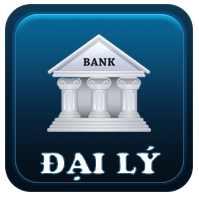
<style>
.page{position:relative;width:199px;height:198px}
.page>*{position:absolute;margin:0}
.t1{font:32px "UTM-Cooper-Black";color:#ffffff}
</style>
<div class="page">
<p class="t1" style="left:40px;top:145px;width:121px;height:36px">ĐẠI LÝ</p>
</div>
